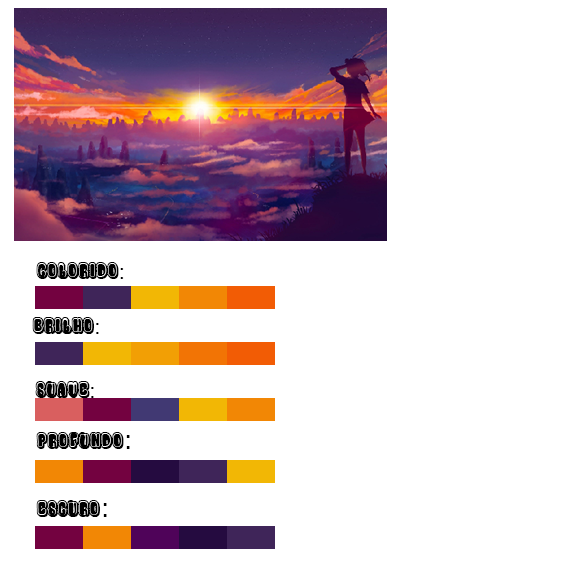
<style>
.page{position:relative;width:580px;height:580px;background:#ffffff}
.page>*{position:absolute;margin:0}
.t1{font:24px "Tsela-Regular";color:#000000}
.t2{font:24px "TimesNewRomanPSMT";color:#000000}
.t3{font:24px "Meiryo";color:#000000}
</style>
<div class="page">
<p class="t1" style="left:36px;top:262px;width:88px;height:17px">colorido<span class="t2">:</span></p>
<p class="t1" style="left:32px;top:317px;width:67px;height:17px">brilho<span class="t2">:</span></p>
<p class="t1" style="left:35px;top:381px;width:59px;height:17px">suave<span class="t2">:</span></p>
<p class="t1" style="left:36px;top:432px;width:94px;height:17px">Profundo<span class="t3">:</span></p>
<p class="t1" style="left:36px;top:500px;width:71px;height:17px">Escuro<span class="t3">:</span></p>
</div>
